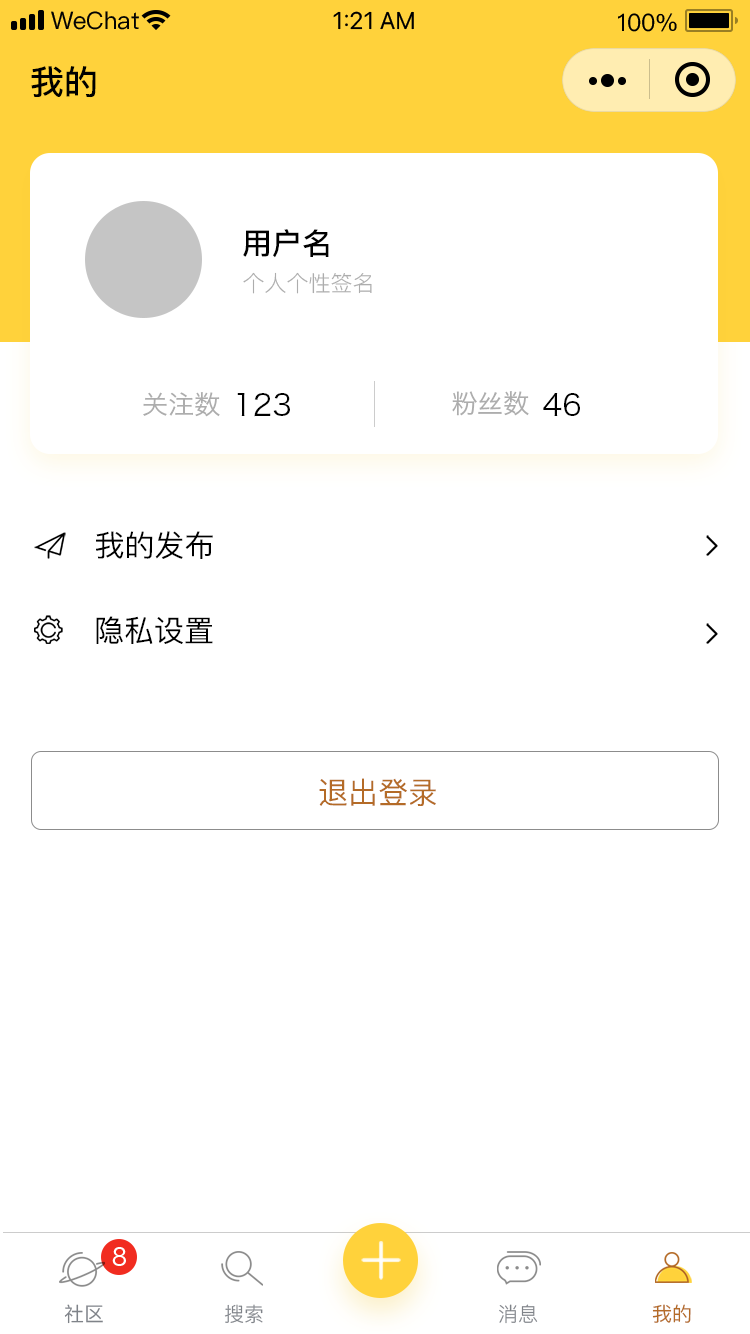
<style>
.page{position:relative;width:750px;height:1334px;background:#ffffff}
.page>*{position:absolute;margin:0}
.t1{font:34px "PingFang-SC-Bold";color:#000000}
.t2{font:30px "PingFang-SC-Bold";color:#000000}
.t3{font:22px "PingFang-SC-Regular";color:#adadad}
.t4{font:26px "HiraginoSansGB-W3";color:#adadad}
.t5{font:30px "HiraginoSansGB-W3";color:#000000}
.t6{font:30px "PingFang-SC-Medium";color:#000000}
.t7{font:30px "PingFang-SC-Medium";color:#b46b27}
.t8{font:20px "PingFang-SC-Medium";color:#7f8389}
.t9{font:20px "PingFangSC-Regular";color:#7f8389}
.t10{font:20px "PingFangSC-Medium";color:#b46b27}
</style>
<div class="page">
<p class="t1" style="left:31px;top:66px;width:65px;height:32px">我的</p>
<p class="t2" style="left:243px;top:229px;width:86px;height:29px">用户名</p>
<p class="t3" style="left:243px;top:272px;width:129px;height:22px">个人个性签名</p>
<p class="t4" style="left:143px;top:392px;width:77px;height:25px">关注数</p>
<p class="t5" style="left:237px;top:393px;width:53px;height:24px">123</p>
<p class="t4" style="left:452px;top:391px;width:77px;height:25px">粉丝数</p>
<p class="t5" style="left:543px;top:393px;width:37px;height:23px">46</p>
<p class="t6" style="left:96px;top:531px;width:117px;height:28px">我的发布</p>
<p class="t6" style="left:96px;top:616px;width:117px;height:28px">隐私设置</p>
<p class="t7" style="left:319px;top:778px;width:117px;height:28px">退出登录</p>
<p class="t8" style="left:64px;top:1304px;width:39px;height:20px">社区</p>
<p class="t9" style="left:224px;top:1304px;width:39px;height:20px">搜索</p>
<p class="t9" style="left:499px;top:1304px;width:39px;height:20px">消息</p>
<p class="t10" style="left:652px;top:1304px;width:39px;height:19px">我的</p>
</div>
